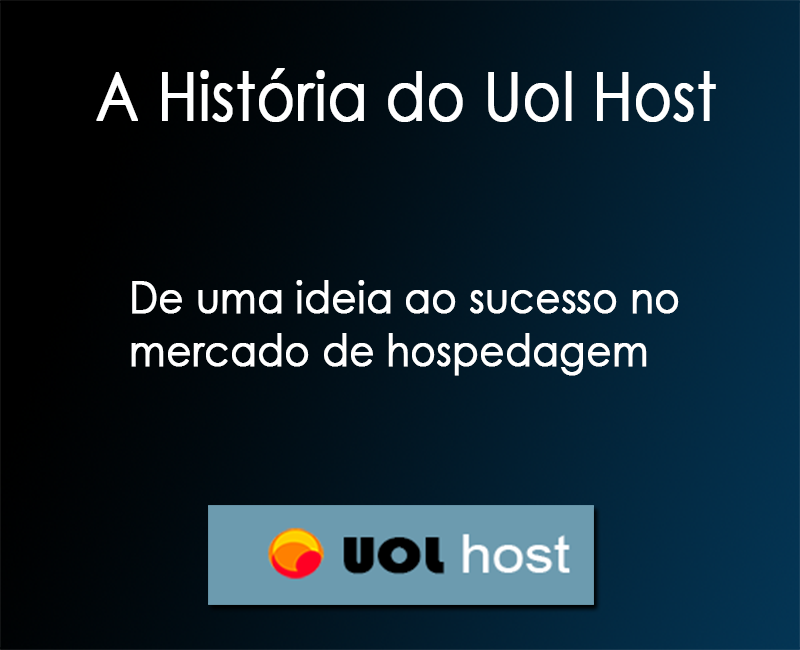
<style>
.page{position:relative;width:800px;height:650px}
.page>*{position:absolute;margin:0}
.t1{font:66.9px "CenturyGothic";color:#ffffff;font-weight:bold;scale:0.86 1}
.t2{font:44.4px "CenturyGothic";color:#ffffff;font-weight:bold;scale:0.86 1}
</style>
<div class="page">
<p class="t1" style="left:96px;top:68px;width:620px;height:54px">A História do Uol Host</p>
<p class="t2" style="left:131px;top:280px;width:548px;height:96px">De uma ideia ao sucesso no<br>mercado de hospedagem</p>
</div>
